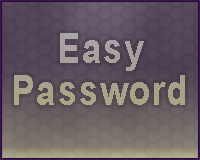
<style>
.page{position:relative;width:200px;height:160px}
.page>*{position:absolute;margin:0}
.t1{font:42px "Arial-BoldMT";letter-spacing:0.05em;color:#a9a38a;scale:0.83 1}
.t2{font:34.6px "ArialMT";letter-spacing:0.05em;color:#a9a38a;scale:0.83 1}
</style>
<div class="page">
<p class="t1" style="left:14px;top:33px;width:171px;height:72px;text-align:center"><span class="t2"><br></span>Easy<br>Password</p>
</div>
